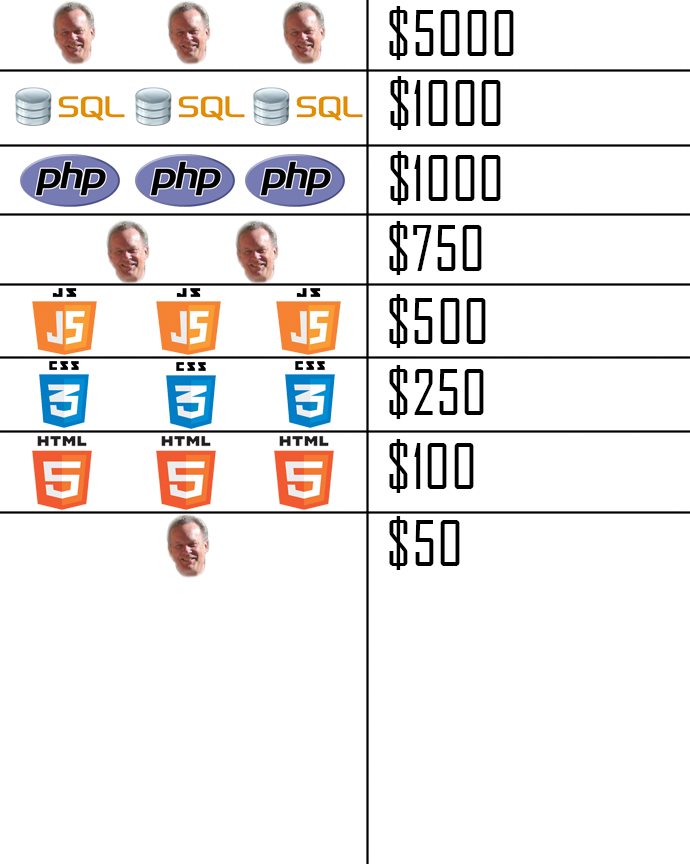
<style>
.page{position:relative;width:690px;height:864px;background:#ffffff}
.page>*{position:absolute;margin:0}
.t1{font:60px "AgencyFB-Reg";letter-spacing:0.01em;color:#000000;text-transform:uppercase}
</style>
<div class="page">
<p class="t1" style="left:389px;top:6px;width:125px;height:54px">$5000</p>
<p class="t1" style="left:390px;top:76px;width:111px;height:54px">$1000</p>
<p class="t1" style="left:390px;top:151px;width:111px;height:54px">$1000</p>
<p class="t1" style="left:389px;top:221px;width:93px;height:54px">$750</p>
<p class="t1" style="left:389px;top:294px;width:97px;height:54px">$500</p>
<p class="t1" style="left:389px;top:365px;width:95px;height:54px">$250</p>
<p class="t1" style="left:389px;top:439px;width:85px;height:54px">$100</p>
<p class="t1" style="left:389px;top:516px;width:71px;height:54px">$50</p>
</div>
